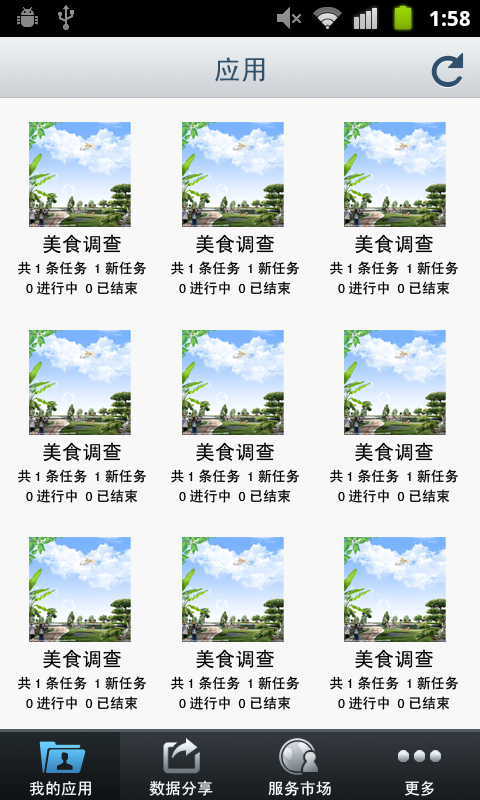
<style>
.page{position:relative;width:480px;height:800px;background:#f8f8f8}
.page>*{position:absolute;margin:0}
.t1{font:27px "SimHei";color:#30506c}
.t2{font:20px "SimHei";color:#000000}
.t3{font:14px/20px "SimHei";color:#000000}
.t4{font:16px "SimHei";color:#ffffff}
</style>
<div class="page">
<p class="t1" style="left:215px;top:57px;width:50px;height:25px">应用</p>
<p class="t2" style="left:43px;top:234px;width:78px;height:20px">美食调查</p>
<p class="t2" style="left:196px;top:234px;width:78px;height:20px">美食调查</p>
<p class="t2" style="left:355px;top:234px;width:78px;height:20px">美食调查</p>
<p class="t3" style="left:18px;top:261px;width:128px;height:34px;text-align:center">共1条任务 1新任务<br>0进行中 0已结束</p>
<p class="t3" style="left:171px;top:261px;width:128px;height:34px;text-align:center">共1条任务 1新任务<br>0进行中 0已结束</p>
<p class="t3" style="left:330px;top:261px;width:128px;height:34px;text-align:center">共1条任务 1新任务<br>0进行中 0已结束</p>
<p class="t2" style="left:43px;top:442px;width:78px;height:20px">美食调查</p>
<p class="t2" style="left:196px;top:442px;width:78px;height:20px">美食调查</p>
<p class="t2" style="left:355px;top:442px;width:78px;height:20px">美食调查</p>
<p class="t3" style="left:18px;top:469px;width:128px;height:34px;text-align:center">共1条任务 1新任务<br>0进行中 0已结束</p>
<p class="t3" style="left:171px;top:469px;width:128px;height:34px;text-align:center">共1条任务 1新任务<br>0进行中 0已结束</p>
<p class="t3" style="left:330px;top:469px;width:128px;height:34px;text-align:center">共1条任务 1新任务<br>0进行中 0已结束</p>
<p class="t2" style="left:43px;top:649px;width:78px;height:20px">美食调查</p>
<p class="t2" style="left:196px;top:649px;width:78px;height:20px">美食调查</p>
<p class="t2" style="left:355px;top:649px;width:78px;height:20px">美食调查</p>
<p class="t3" style="left:18px;top:676px;width:128px;height:34px;text-align:center">共1条任务 1新任务<br>0进行中 0已结束</p>
<p class="t3" style="left:171px;top:676px;width:128px;height:34px;text-align:center">共1条任务 1新任务<br>0进行中 0已结束</p>
<p class="t3" style="left:330px;top:676px;width:128px;height:34px;text-align:center">共1条任务 1新任务<br>0进行中 0已结束</p>
<p class="t4" style="left:29px;top:781px;width:62px;height:15px">我的应用</p>
<p class="t4" style="left:149px;top:780px;width:64px;height:16px">数据分享</p>
<p class="t4" style="left:268px;top:780px;width:63px;height:16px">服务市场</p>
<p class="t4" style="left:405px;top:780px;width:29px;height:16px">更多</p>
</div>
